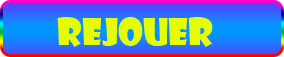
<style>
.page{position:relative;width:284px;height:57px}
.page>*{position:absolute;margin:0}
.t1{font:36px "ShowcardGothic-Reg";color:#e5fc04}
</style>
<div class="page">
<p class="t1" style="left:57px;top:17px;width:156px;height:30px">Rejouer</p>
</div>
